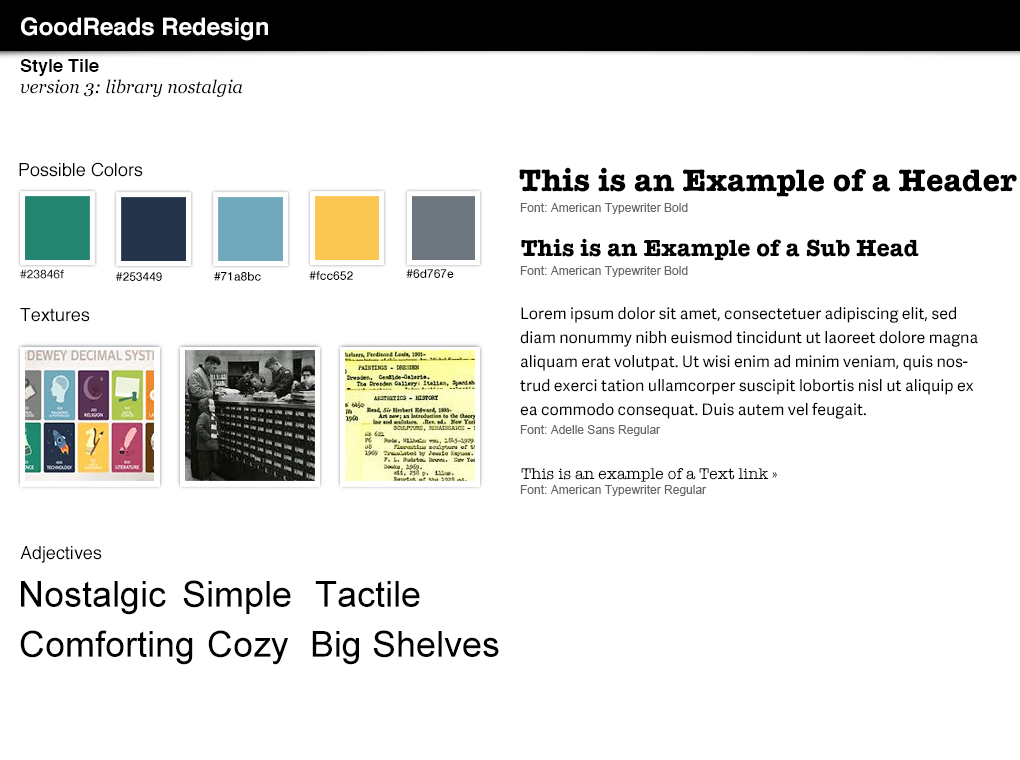
<style>
.page{position:relative;width:1020px;height:760px;background:#ffffff}
.page>*{position:absolute;margin:0}
.t1{font:24px "Helvetica-Bold";color:#ffffff}
.t2{font:18px "Helvetica-Bold";color:#000000}
.t3{font:18px "Georgia-Italic";color:#000000}
.t4{font:18px "Helvetica";color:#000000}
.t5{font:32px "AmericanTypewriter-Bold";color:#000000}
.t6{font:12px "ArialMT";color:#666666}
.t7{font:24px "AmericanTypewriter-Bold";color:#000000}
.t8{font:12px "HelveticaNeue-Medium";color:#282828}
.t9{font:12px "HelveticaNeue-Medium";color:#000000}
.t10{font:16px/24px "AdelleSans-Regular";color:#000000}
.t11{font:16px "AmericanTypewriter";color:#000000}
.t12{font:36px "ArialMT";color:#000000}
</style>
<div class="page">
<p class="t1" style="left:21px;top:17px;width:247px;height:24px">GoodReads Redesign</p>
<p class="t2" style="left:20px;top:59px;width:79px;height:17px">Style Tile</p>
<p class="t3" style="left:20px;top:79px;width:223px;height:18px">version 3: library nostalgia</p>
<p class="t4" style="left:19px;top:162px;width:124px;height:15px">Possible Colors</p>
<p class="t5" style="left:519px;top:167px;width:498px;height:30px">This is an Example of a Header</p>
<p class="t6" style="left:520px;top:203px;width:168px;height:11px">Font: American Typewriter Bold</p>
<p class="t7" style="left:521px;top:238px;width:398px;height:23px">This is an Example of a Sub Head</p>
<p class="t8" style="left:20px;top:269px;width:44px;height:10px">#23846f</p>
<p class="t9" style="left:406px;top:269px;width:48px;height:9px">#6d767e</p>
<p class="t6" style="left:520px;top:266px;width:168px;height:11px">Font: American Typewriter Bold</p>
<p class="t9" style="left:116px;top:272px;width:46px;height:9px">#253449</p>
<p class="t9" style="left:214px;top:272px;width:47px;height:9px">#71a8bc</p>
<p class="t9" style="left:309px;top:271px;width:44px;height:9px">#fcc652</p>
<p class="t4" style="left:20px;top:308px;width:70px;height:14px">Textures</p>
<p class="t10" style="left:520px;top:307px;width:458px;height:112px">Lorem ipsum dolor sit amet, consectetuer adipiscing elit, sed diam nonummy nibh euismod tincidunt ut laoreet dolore magna aliquam erat volutpat. Ut wisi enim ad minim veniam, quis nostrud exerci tation ullamcorper suscipit lobortis nisl ut aliquip ex ea commodo consequat. Duis autem vel feugait.</p>
<p class="t6" style="left:520px;top:425px;width:141px;height:11px">Font: Adelle Sans Regular</p>
<p class="t11" style="left:521px;top:468px;width:256px;height:14px">This is an example of a Text link »</p>
<p class="t6" style="left:520px;top:485px;width:187px;height:11px">Font: American Typewriter Regular</p>
<p class="t4" style="left:20px;top:546px;width:82px;height:17px">Adjectives</p>
<p class="t12" style="left:21px;top:581px;width:145px;height:34px">Nostalgic</p>
<p class="t12" style="left:183px;top:580px;width:108px;height:34px">Simple</p>
<p class="t12" style="left:315px;top:581px;width:105px;height:26px">Tactile</p>
<p class="t12" style="left:20px;top:630px;width:173px;height:35px">Comforting</p>
<p class="t12" style="left:208px;top:630px;width:81px;height:35px">Cozy</p>
<p class="t12" style="left:312px;top:630px;width:187px;height:35px">Big Shelves</p>
</div>
